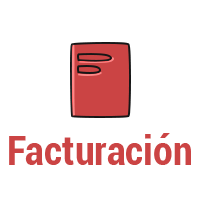
<style>
.page{position:relative;width:200px;height:200px;background:#ffffff}
.page>*{position:absolute;margin:0}
.t1{font:40px "Roboto-BoldCondensed";color:#cb4444}
</style>
<div class="page">
<p class="t1" style="left:9px;top:133px;width:182px;height:32px">Facturación</p>
</div>
